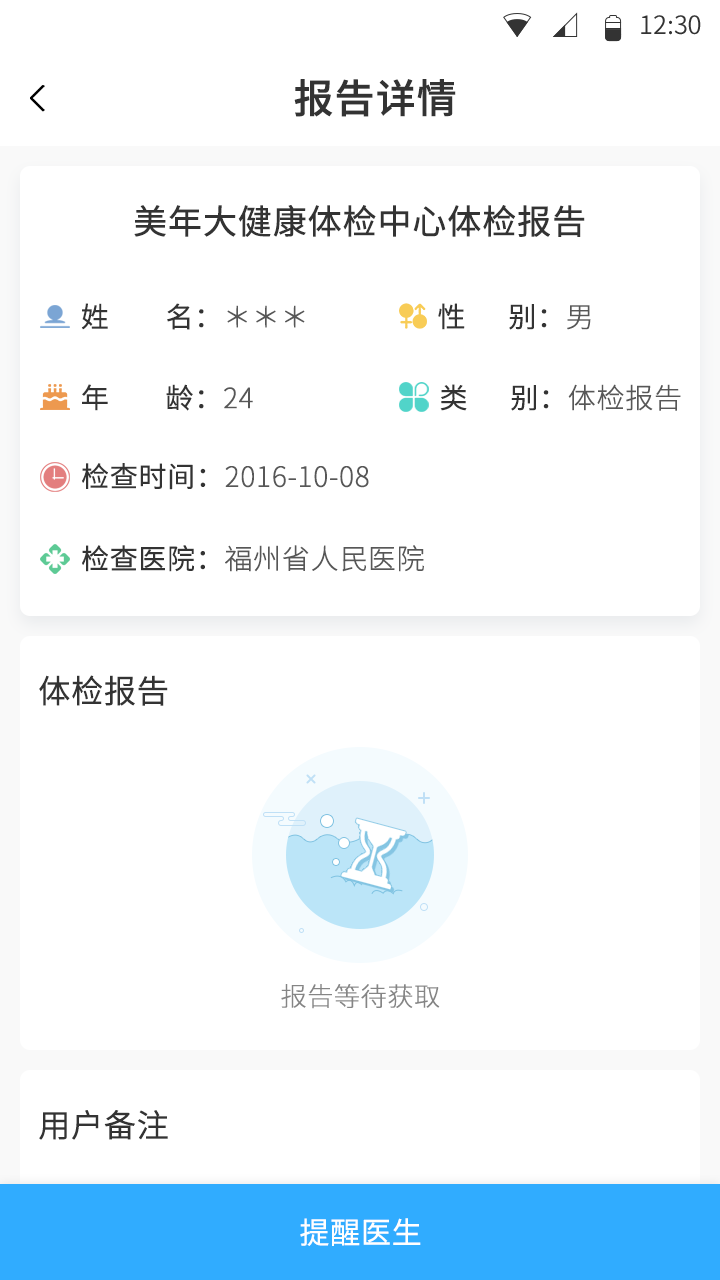
<style>
.page{position:relative;width:720px;height:1280px;background:#ffffff}
.page>*{position:absolute;margin:0}
.t1{font:25.4px "SourceHanSansCN-Normal";color:#333333}
.t2{font:40px "SourceHanSansCN-Medium";color:#333333;font-weight:bold}
.t3{font:34px "SourceHanSansCN-Regular";color:#333333;font-weight:bold}
.t4{font:28px "SourceHanSansCN-Normal";color:#333333;font-weight:bold}
.t5{font:28px "SourceHanSansCN-Light";color:#575757;font-weight:bold}
.t6{font:32px "SourceHanSansCN-Normal";color:#333333;font-weight:bold}
.t7{font:26px "SourceHanSansCN-Light";color:#858585;font-weight:bold}
.t8{font:30px "SourceHanSansCN-Normal";color:#ffffff;font-weight:bold}
</style>
<div class="page">
<p class="t1" style="left:641px;top:15px;width:60px;height:20px">12:30</p>
<p class="t2" style="left:294px;top:79px;width:162px;height:38px">报告详情</p>
<p class="t3" style="left:134px;top:205px;width:451px;height:32px">美年大健康体检中心体检报告</p>
<p class="t4" style="left:81px;top:303px;width:224px;height:27px">姓        名：<span class="t5">＊＊＊</span></p>
<p class="t4" style="left:438px;top:303px;width:153px;height:27px">性      别：<span class="t5">男</span></p>
<p class="t4" style="left:82px;top:384px;width:171px;height:27px">年        龄：<span class="t5">24</span></p>
<p class="t4" style="left:440px;top:384px;width:241px;height:27px">类      别：<span class="t5">体检报告</span></p>
<p class="t5" style="left:82px;top:463px;width:287px;height:27px"><span class="t4">检查时间：</span>2016-10-08</p>
<p class="t5" style="left:82px;top:545px;width:342px;height:27px"><span class="t4">检查医院：</span>福州省人民医院</p>
<p class="t6" style="left:39px;top:675px;width:129px;height:31px">体检报告</p>
<p class="t7" style="left:281px;top:984px;width:159px;height:25px">报告等待获取</p>
<p class="t6" style="left:39px;top:1110px;width:129px;height:30px">用户备注</p>
<p class="t8" style="left:300px;top:1218px;width:121px;height:28px">提醒医生</p>
</div>
